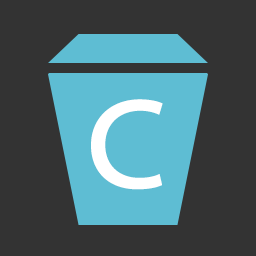
<style>
.page{position:relative;width:256px;height:256px;background:#333333}
.page>*{position:absolute;margin:0}
.t1{font:27.3px "AdobeHeitiStd-Regular";color:#ffffff}
</style>
<div class="page">
<p class="t1" style="left:91px;top:99px;width:72px;height:91px">C</p>
</div>
